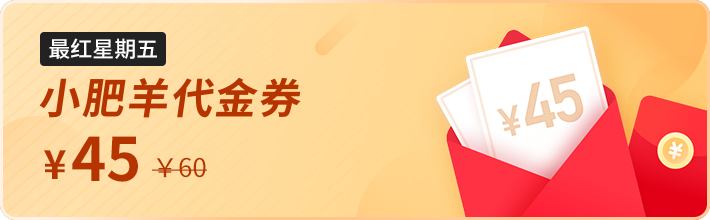
<style>
.page{position:relative;width:710px;height:220px}
.page>*{position:absolute;margin:0}
.t1{font:22px "SourceHanSansCN-Medium";color:#ffffff}
.t2{font:60px "SourceHanSansCN-Bold";color:#b53400}
.t3{font:40px "SourceHanSansCN-Bold";color:#b53400}
.t4{font:26px "SourceHanSansCN-Regular";color:#b53400}
</style>
<div class="page">
<p class="t1" style="left:49px;top:38px;width:108px;height:21px">最红星期五</p>
<p class="t2" style="left:72px;top:136px;width:66px;height:46px">45</p>
<p class="t3" style="left:43px;top:150px;width:23px;height:29px">¥</p>
<p class="t4" style="left:152px;top:157px;width:55px;height:21px">￥60</p>
</div>
